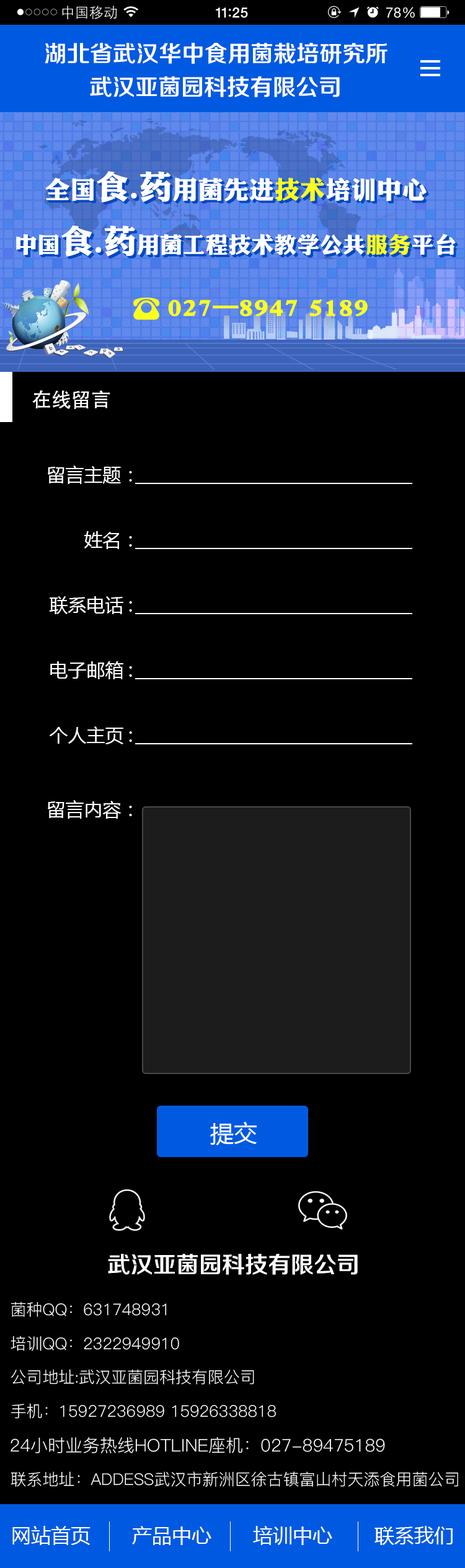
<style>
.page{position:relative;width:465px;height:1568px;background:#000000}
.page>*{position:absolute;margin:0}
.t1{font:22.9px "FZZZHONGJW--GB1-0";color:#ffffff}
.t2{font:19.8px "AdobeHeitiStd-Regular";color:#ffffff}
.t3{font:18.6px "MicrosoftYaHei";color:#ffffff}
.t4{font:23.6px "MicrosoftYaHei";color:#ffffff}
.t5{font:16.1px "PingFang-SC-Regular";color:#ffffff}
.t6{font:17.4px "PingFang-SC-Regular";color:#ffffff}
.t7{font:19.8px "MicrosoftYaHei";color:#ffffff}
</style>
<div class="page">
<p class="t1" style="left:45px;top:43px;width:342px;height:21px">湖北省武汉华中食用菌栽培研究所</p>
<p class="t1" style="left:90px;top:76px;width:250px;height:21px">武汉亚菌园科技有限公司</p>
<p class="t2" style="left:32px;top:390px;width:78px;height:19px">在线留言</p>
<p class="t3" style="left:48px;top:465px;width:84px;height:19px">留言主题：</p>
<p class="t3" style="left:84px;top:531px;width:48px;height:18px">姓名：</p>
<p class="t3" style="left:49px;top:596px;width:83px;height:18px">联系电话:</p>
<p class="t3" style="left:50px;top:661px;width:82px;height:18px">电子邮箱:</p>
<p class="t3" style="left:49px;top:726px;width:83px;height:18px">个人主页:</p>
<p class="t3" style="left:48px;top:800px;width:84px;height:19px">留言内容：</p>
<p class="t4" style="left:210px;top:1122px;width:47px;height:23px">提交</p>
<p class="t1" style="left:108px;top:1254px;width:250px;height:21px">武汉亚菌园科技有限公司</p>
<p class="t5" style="left:11px;top:1302px;width:156px;height:15px">菌种QQ：631748931</p>
<p class="t5" style="left:11px;top:1336px;width:168px;height:15px">培训QQ：2322949910</p>
<p class="t5" style="left:11px;top:1369px;width:243px;height:16px">公司地址:武汉亚菌园科技有限公司</p>
<p class="t5" style="left:11px;top:1403px;width:265px;height:16px">手机：15927236989 15926338818</p>
<p class="t6" style="left:11px;top:1437px;width:374px;height:16px">24小时业务热线HOTLINE座机：027-89475189</p>
<p class="t5" style="left:11px;top:1471px;width:447px;height:16px">联系地址：ADDESS武汉市新洲区徐古镇富山村天添食用菌公司</p>
<p class="t7" style="left:12px;top:1526px;width:78px;height:19px">网站首页</p>
<p class="t7" style="left:132px;top:1526px;width:79px;height:19px">产品中心</p>
<p class="t7" style="left:253px;top:1526px;width:79px;height:19px">培训中心</p>
<p class="t7" style="left:374px;top:1526px;width:78px;height:19px">联系我们</p>
</div>
